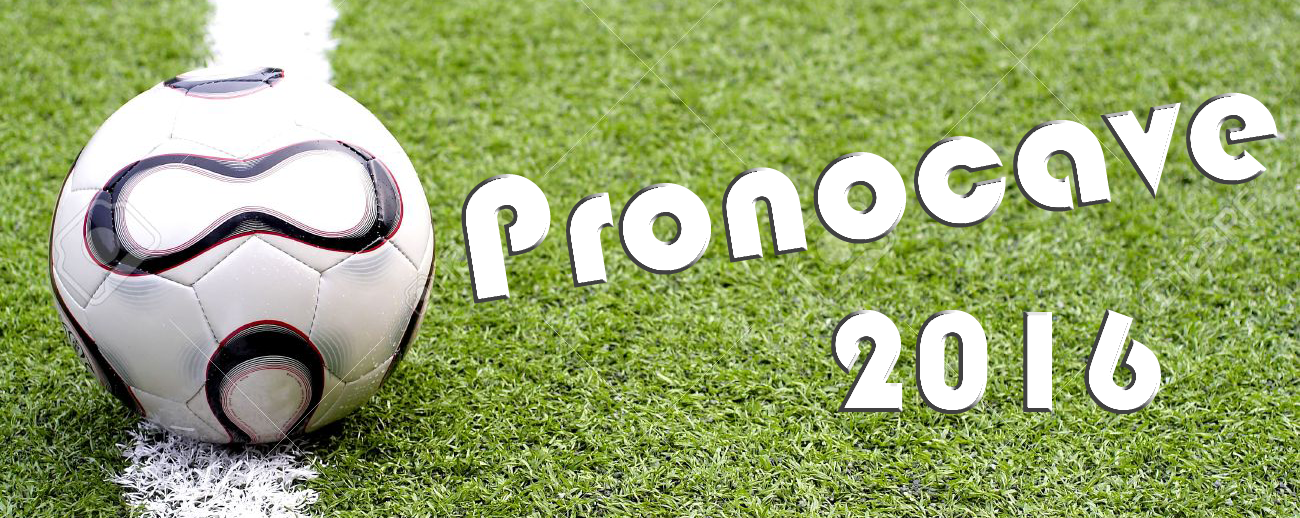
<style>
.page{position:relative;width:1300px;height:518px}
.page>*{position:absolute;margin:0}
.t1{font:180px "Bauhaus93";color:#ffffff}
.t2{font:150px "Bauhaus93";color:#ffffff}
</style>
<div class="page">
<p class="t1" style="left:461px;top:92px;width:817px;height:212px;rotate:-9deg">Pronocave</p>
<p class="t2" style="left:831px;top:309px;width:330px;height:105px">2016</p>
</div>
